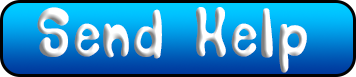
<style>
.page{position:relative;width:356px;height:77px}
.page>*{position:absolute;margin:0}
.t1{font:52px "SORRY_SORRY";letter-spacing:0.03em}
</style>
<div class="page">
<p class="t1" style="left:37px;top:7px;width:270px;height:66px">Send Help</p>
</div>
